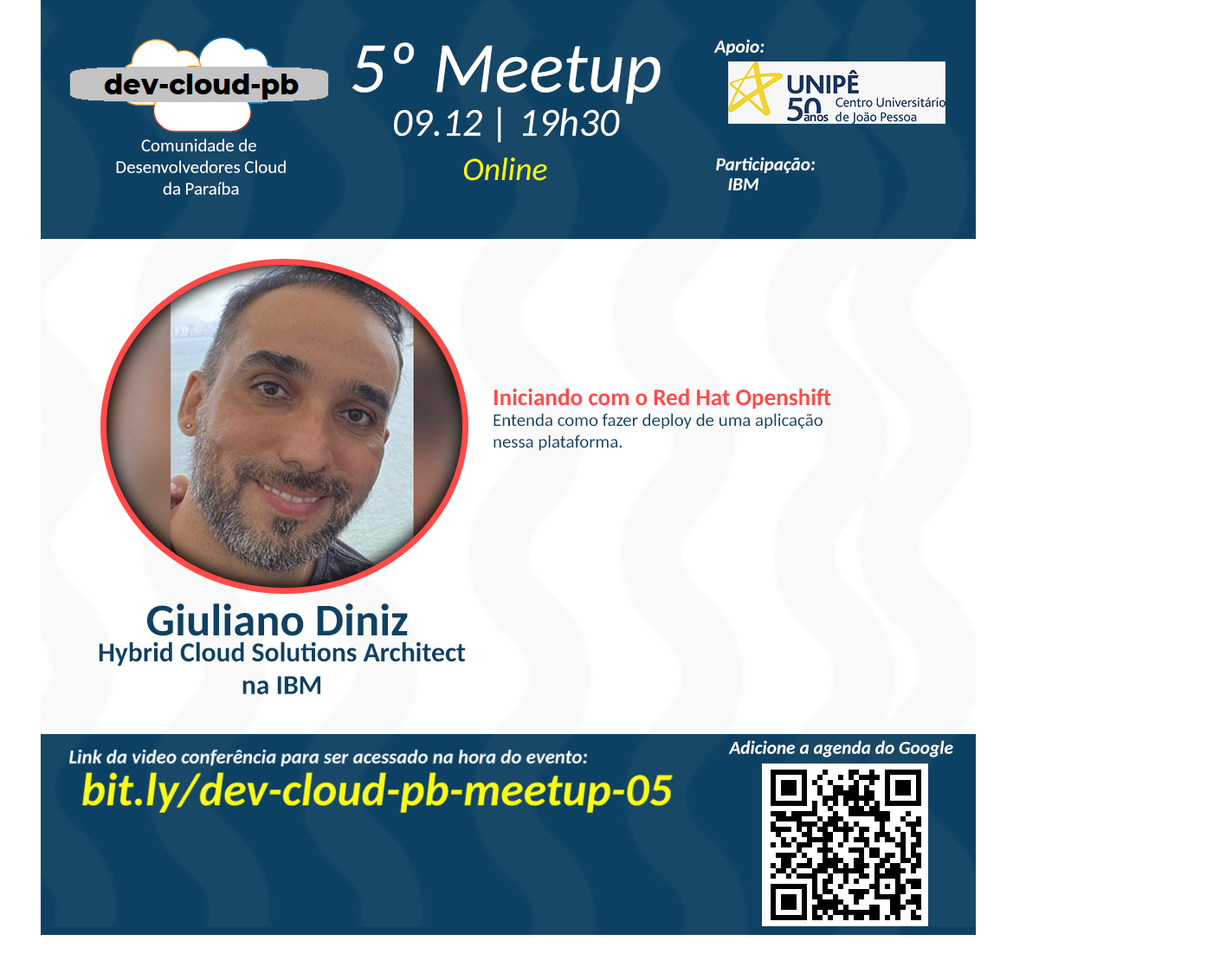
<style>
.page{position:relative;width:1226px;height:973px;background:#ffffff}
.page>*{position:absolute;margin:0}
.t1{font:18.4px "Carlito-BoldItalic";color:#ffffff}
.t2{font:72.3px "Carlito-Italic";color:#ffffff}
.t3{font:39.6px "Carlito-Italic";color:#ffffff}
.t4{font:18px "Carlito";color:#ffffff}
.t5{font:32.4px "Carlito-Italic";color:#f8fb00}
.t6{font:23.5px "Carlito-Bold";color:#ff4b4a}
.t7{font:18px "Carlito";color:#0d4163}
.t8{font:45.5px "Carlito-Bold";color:#0d4163}
.t9{font:27.3px "Carlito-Bold";color:#0d4163}
</style>
<div class="page">
<p class="t1" style="left:713px;top:39px;width:51px;height:16px">Apoio:</p>
<p class="t2" style="left:351px;top:42px;width:309px;height:62px">5º Meetup</p>
<p class="t3" style="left:394px;top:106px;width:226px;height:37px">09.12 | 19h30</p>
<p class="t4" style="left:116px;top:138px;width:170px;height:57px;text-align:center">Comunidade de <br>Desenvolvedores Cloud<br>da Paraíba</p>
<p class="t5" style="left:464px;top:158px;width:83px;height:23px">Online</p>
<p class="t1" style="left:716px;top:157px;width:99px;height:16px">Participação:</p>
<p class="t1" style="left:728px;top:178px;width:30px;height:12px">IBM</p>
<p class="t6" style="left:494px;top:388px;width:337px;height:21px">Iniciando com o Red Hat Openshift</p>
<p class="t7" style="left:493px;top:413px;width:329px;height:38px">Entenda como fazer deploy de uma aplicação <br>nessa plataforma.</p>
<p class="t8" style="left:147px;top:603px;width:261px;height:33px">Giuliano Diniz</p>
<p class="t9" style="left:99px;top:641px;width:367px;height:53px;text-align:center">Hybrid Cloud Solutions Architect<br>na IBM</p>
<p class="t1" style="left:728px;top:740px;width:225px;height:17px">Adicione a agenda do Google</p>
</div>
